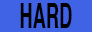
<style>
.page{position:relative;width:92px;height:32px;background:#4062e5}
.page>*{position:absolute;margin:0}
.t1{font:34px "Helvetica-Bold";color:#000000;scale:0.54 1}
</style>
<div class="page">
<p class="t1" style="left:20px;top:3px;width:52px;height:25px">HARD</p>
</div>
